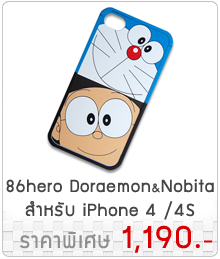
<style>
.page{position:relative;width:220px;height:259px;background:#ffffff}
.page>*{position:absolute;margin:0}
.t1{font:20px "supermarket";letter-spacing:0.05em;color:#454545}
.t2{font:14px "supermarket";letter-spacing:0.05em;color:#454545}
.t3{font:24px "supermarket";letter-spacing:0.05em;color:#918f90}
.t4{font:36px "supermarket";letter-spacing:0.05em;color:#d80003}
.t5{font:24px "supermarket";letter-spacing:0.05em;color:#d80003}
</style>
<div class="page">
<p class="t1" style="left:6px;top:179px;width:208px;height:41px;text-align:center">86hero Doraemon<span class="t2">&amp;</span>Nobita<br>สำหรับ iPhone 4 /4S</p>
<p class="t3" style="left:19px;top:225px;width:194px;height:28px">ราคาพิเศษ <span class="t4">1,190.</span><span class="t5">-</span></p>
</div>
